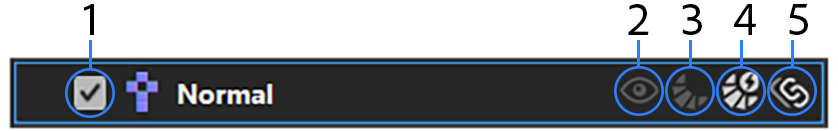
<style>
.page{position:relative;width:838px;height:131px;background:#ffffff}
.page>*{position:absolute;margin:0}
.t1{font:48px "AdobeClean-Regular";color:#000000}
</style>
<div class="page">
<p class="t1" style="left:84px;top:4px;width:10px;height:31px">1</p>
<p class="t1" style="left:628px;top:4px;width:21px;height:31px">2</p>
<p class="t1" style="left:682px;top:4px;width:20px;height:31px">3</p>
<p class="t1" style="left:734px;top:4px;width:22px;height:31px">4</p>
<p class="t1" style="left:789px;top:4px;width:19px;height:31px">5</p>
</div>
